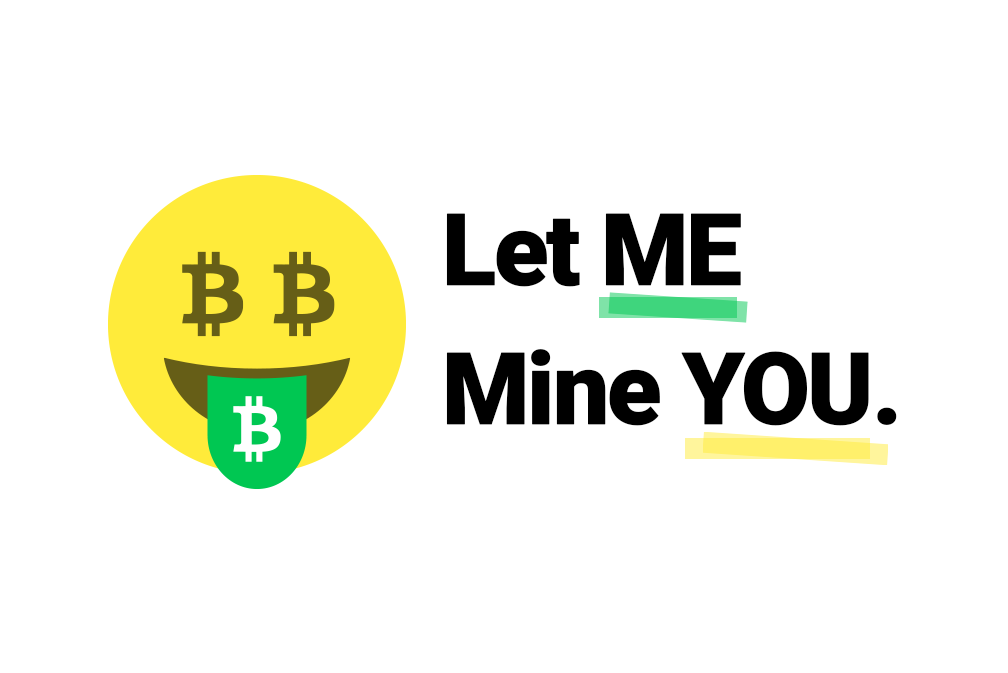
<style>
.page{position:relative;width:1008px;height:673px;background:#ffffff}
.page>*{position:absolute;margin:0}
.t1{font:100.3px/138.8px "Roboto-Black";letter-spacing:-0.05em;color:#000000;font-weight:bold}
</style>
<div class="page">
<p class="t1" style="left:446px;top:213px;width:451px;height:213px">Let ME<br>Mine YOU.</p>
</div>
